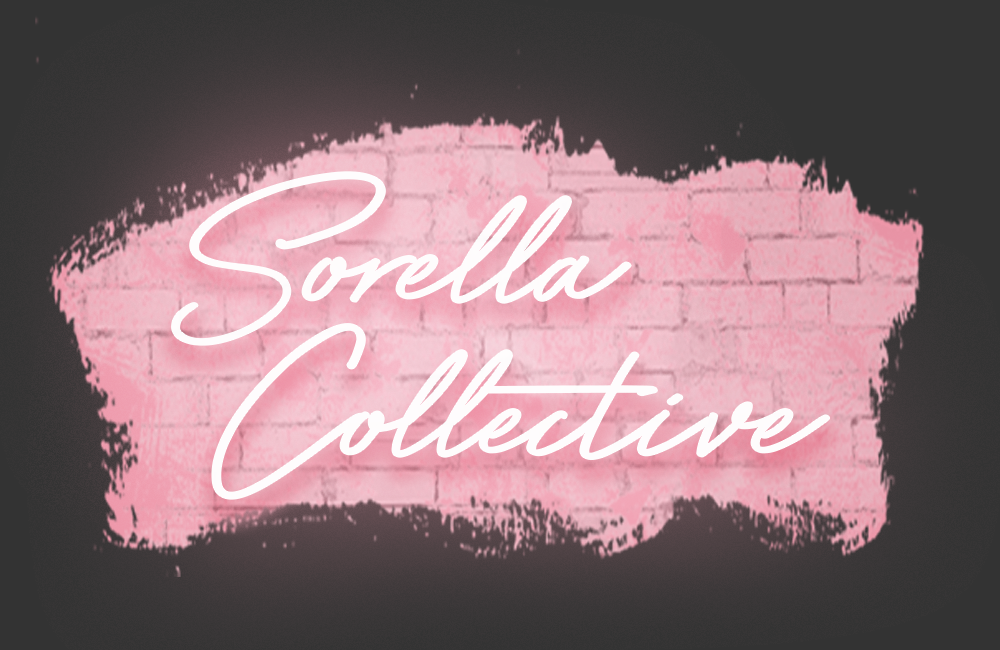
<style>
.page{position:relative;width:1000px;height:650px}
.page>*{position:absolute;margin:0}
.t1{font:231.1px "Bayshore";color:#ffffff}
</style>
<div class="page">
<p class="t1" style="left:172px;top:172px;width:459px;height:173px;opacity:0.96">Sorella</p>
<p class="t1" style="left:212px;top:324px;width:618px;height:175px;opacity:0.96">Collective</p>
</div>
